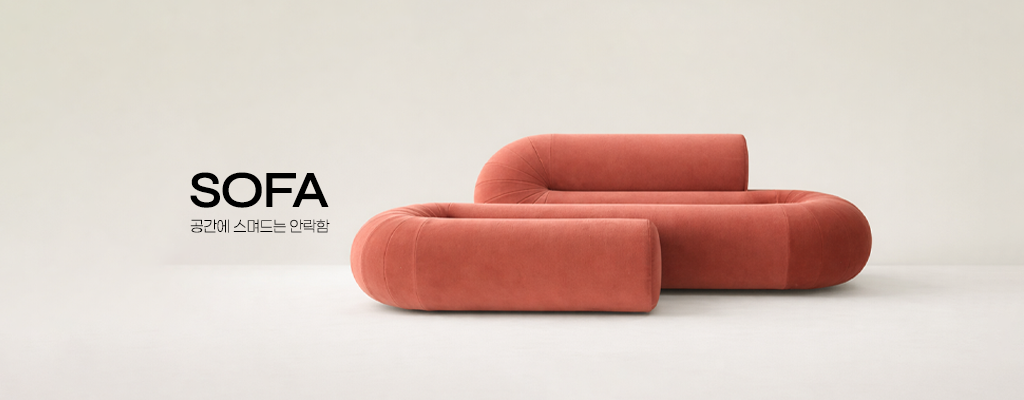
<style>
.page{position:relative;width:1024px;height:400px}
.page>*{position:absolute;margin:0}
.t1{font:52px "Syne-SemiBold";letter-spacing:-0.04em;color:#000000}
.t2{font:15.1px "Paperlogy-2ExtraLight";color:#000000}
</style>
<div class="page">
<p class="t1" style="left:190px;top:172px;width:139px;height:36px">SOFA</p>
<p class="t2" style="left:190px;top:219px;width:140px;height:14px">공간에 스며드는 안락함</p>
</div>
